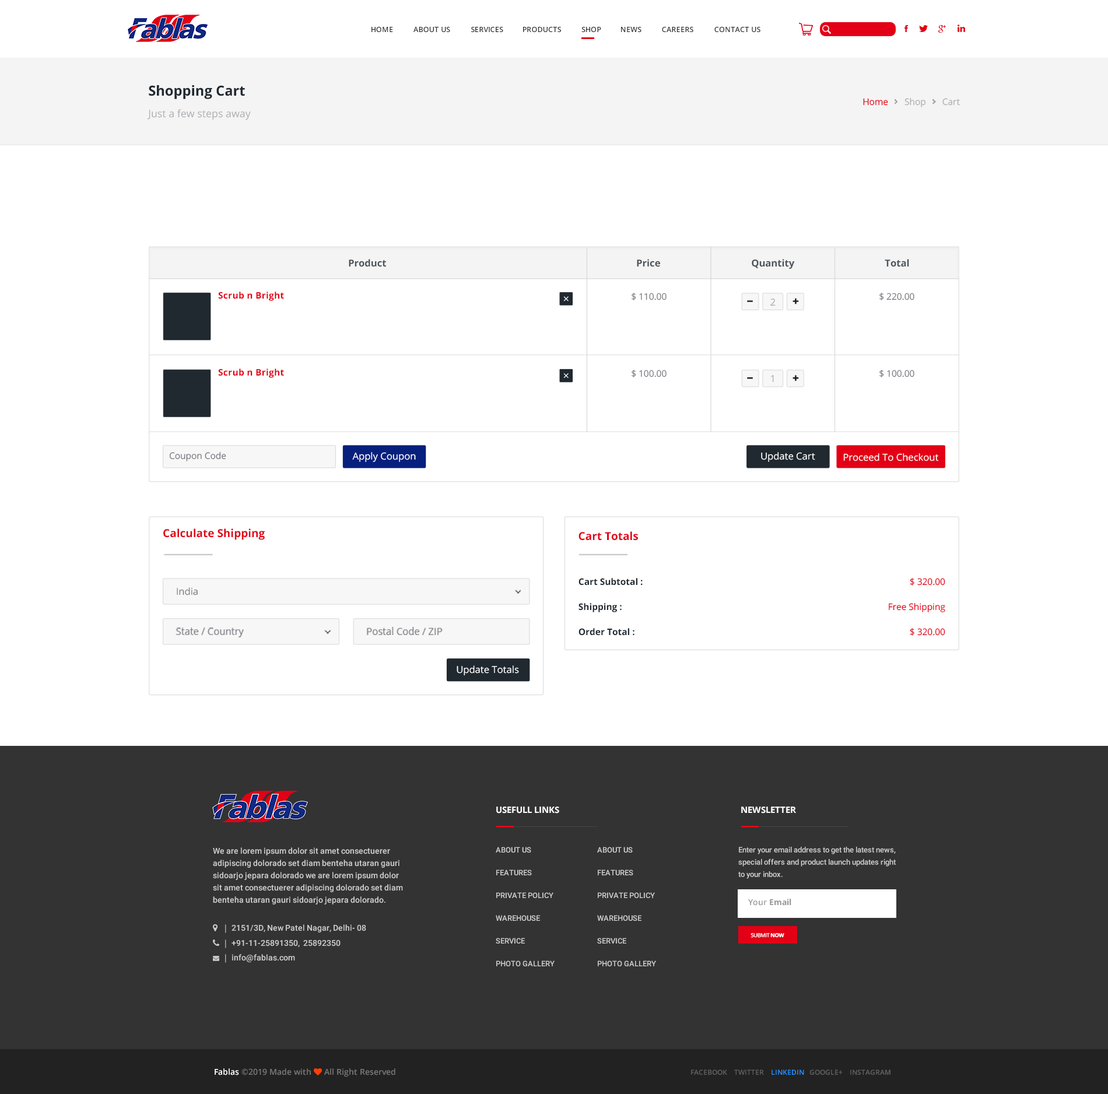
<style>
.page{position:relative;width:1108px;height:1094px;background:#ffffff}
.page>*{position:absolute;margin:0}
.t1{font:7.3px "OpenSans-SemiBold";color:#333333}
.t2{font:8.1px "OpenSans-SemiBold";color:#333333}
.t3{font:13.8px "OpenSans-Bold";color:#202830}
.t4{font:9px "OpenSans";color:#afb0b4}
.t5{font:9px "OpenSans";color:#e30016}
.t6{font:10.4px "OpenSans";color:#afb0b4}
.t7{font:9.7px "OpenSans-Bold";color:#4d5359}
.t8{font:9px "OpenSans-Bold";letter-spacing:0.02em;color:#e30016}
.t9{font:9px "OpenSans";color:#7a7c82}
.t10{font:9.7px "OpenSans";color:#acacac}
.t11{font:9.7px "OpenSans";color:#ffffff}
.t12{font:11.1px "OpenSans-Bold";color:#e30016}
.t13{font:9px/24.9px "OpenSans-Bold";color:#202830}
.t14{font:9px/24.9px "OpenSans";color:#e30016}
.t15{font:9.7px "OpenSans";color:#7a7c82}
.t16{font:8.7px "OpenSans-Bold";color:#ffffff}
.t17{font:8.2px/12.2px "Roboto-Medium";color:#cccccc}
.t18{font:7.6px/22.7px "Roboto-Medium";color:#cccccc}
.t19{font:7.6px/12.1px "Roboto-Medium";color:#cccccc}
.t20{font:8.2px "OpenSans-Bold";color:#999999}
.t21{font:8.2px "OpenSans-SemiBold";color:#999999}
.t22{font:5.4px "OpenSans";letter-spacing:-0.04em;color:#ffffff}
.t23{font:5.4px "OpenSans-Bold";letter-spacing:-0.04em;color:#ffffff}
.t24{font:7px "OpenSans-SemiBold";color:#616161}
.t25{font:7px "OpenSans-SemiBold";color:#2692ff}
</style>
<div class="page">
<p class="t1" style="left:371px;top:27px;width:22px;height:5px">HOME</p>
<p class="t1" style="left:413px;top:27px;width:37px;height:5px"><span class="t2">                     </span>ABOUT US</p>
<p class="t1" style="left:471px;top:27px;width:32px;height:5px"><span class="t2">                                                 </span>SERVICES</p>
<p class="t1" style="left:523px;top:27px;width:38px;height:5px"><span class="t2">                                                                                </span>PRODUCTS</p>
<p class="t1" style="left:581px;top:27px;width:20px;height:5px"><span class="t2">                                                                                                              </span>SHOP</p>
<p class="t1" style="left:621px;top:27px;width:20px;height:5px"><span class="t2">                                                                                                                                   </span>NEWS</p>
<p class="t1" style="left:662px;top:27px;width:31px;height:5px"><span class="t2">                                                                                                                                                          </span>CAREERS</p>
<p class="t1" style="left:714px;top:27px;width:46px;height:5px"><span class="t2">                                                                                                                                                                                       </span>CONTACT US</p>
<p class="t3" style="left:149px;top:85px;width:96px;height:14px">Shopping Cart</p>
<p class="t4" style="left:863px;top:98px;width:97px;height:9px"><span class="t5">Home </span>      Shop       Cart</p>
<p class="t6" style="left:147px;top:109px;width:104px;height:11px">Just a few steps away</p>
<p class="t7" style="left:349px;top:259px;width:37px;height:8px">Product</p>
<p class="t7" style="left:637px;top:259px;width:23px;height:8px">Price</p>
<p class="t7" style="left:752px;top:259px;width:43px;height:10px">Quantity</p>
<p class="t7" style="left:885px;top:259px;width:24px;height:8px">Total</p>
<p class="t8" style="left:218px;top:292px;width:66px;height:9px">Scrub n Bright</p>
<p class="t9" style="left:631px;top:293px;width:35px;height:8px">$ 110.00</p>
<p class="t9" style="left:879px;top:293px;width:35px;height:8px">$ 220.00</p>
<p class="t10" style="left:770px;top:298px;width:5px;height:8px">2</p>
<p class="t8" style="left:218px;top:369px;width:66px;height:9px">Scrub n Bright</p>
<p class="t9" style="left:631px;top:370px;width:35px;height:8px">$ 100.00</p>
<p class="t10" style="left:771px;top:375px;width:3px;height:7px">1</p>
<p class="t9" style="left:879px;top:370px;width:35px;height:8px">$ 100.00</p>
<p class="t9" style="left:169px;top:452px;width:57px;height:9px">Coupon Code</p>
<p class="t11" style="left:352px;top:452px;width:64px;height:10px">Apply Coupon</p>
<p class="t11" style="left:761px;top:452px;width:54px;height:10px">Update Cart</p>
<p class="t11" style="left:843px;top:453px;width:96px;height:8px">Proceed To Checkout</p>
<p class="t12" style="left:163px;top:528px;width:102px;height:12px">Calculate Shipping</p>
<p class="t12" style="left:578px;top:531px;width:60px;height:10px">Cart Totals</p>
<p class="t13" style="left:578px;top:578px;width:65px;height:58px">Cart Subtotal :<br>Shipping :<br>Order Total :</p>
<p class="t14" style="left:889px;top:578px;width:56px;height:58px;text-align:right">$ 320.00<br>Free Shipping<br>$ 320.00</p>
<p class="t15" style="left:177px;top:587px;width:21px;height:8px">India</p>
<p class="t15" style="left:176px;top:627px;width:68px;height:10px">State / Country</p>
<p class="t15" style="left:367px;top:627px;width:76px;height:8px">Postal Code / ZIP</p>
<p class="t11" style="left:457px;top:665px;width:62px;height:11px">Update Totals</p>
<p class="t16" style="left:496px;top:806px;width:63px;height:7px">USEFULL LINKS</p>
<p class="t16" style="left:741px;top:806px;width:55px;height:7px">NEWSLETTER</p>
<p class="t17" style="left:213px;top:847px;width:190px;height:57px">We are lorem ipsum dolor sit amet consectuerer adipiscing dolorado set diam benteha utaran gauri sidoarjo jepara dolorado we are lorem ipsum dolor sit amet consectuerer adipiscing dolorado set diam benteha utaran gauri sidoarjo jepara dolorado.</p>
<p class="t18" style="left:496px;top:847px;width:59px;height:119px">ABOUT US<br>FEATURES<br>PRIVATE POLICY<br>WAREHOUSE<br>SERVICE<br>PHOTO GALLERY</p>
<p class="t18" style="left:597px;top:847px;width:59px;height:119px">ABOUT US<br>FEATURES<br>PRIVATE POLICY<br>WAREHOUSE<br>SERVICE<br>PHOTO GALLERY</p>
<p class="t19" style="left:738px;top:847px;width:158px;height:32px">Enter your email address to get the latest news, special offers and product launch updates right to your inbox.</p>
<p class="t20" style="left:748px;top:899px;width:43px;height:7px"><span class="t21">Your </span>Email</p>
<p class="t22" style="left:750px;top:933px;width:34px;height:5px">SUBMIT <span class="t23">NOW</span></p>
<p class="t24" style="left:691px;top:1069px;width:199px;height:6px">FACEBOOK    TWITTER    <span class="t25">LINKEDIN</span>   GOOGLE+    INSTAGRAM</p>
</div>
